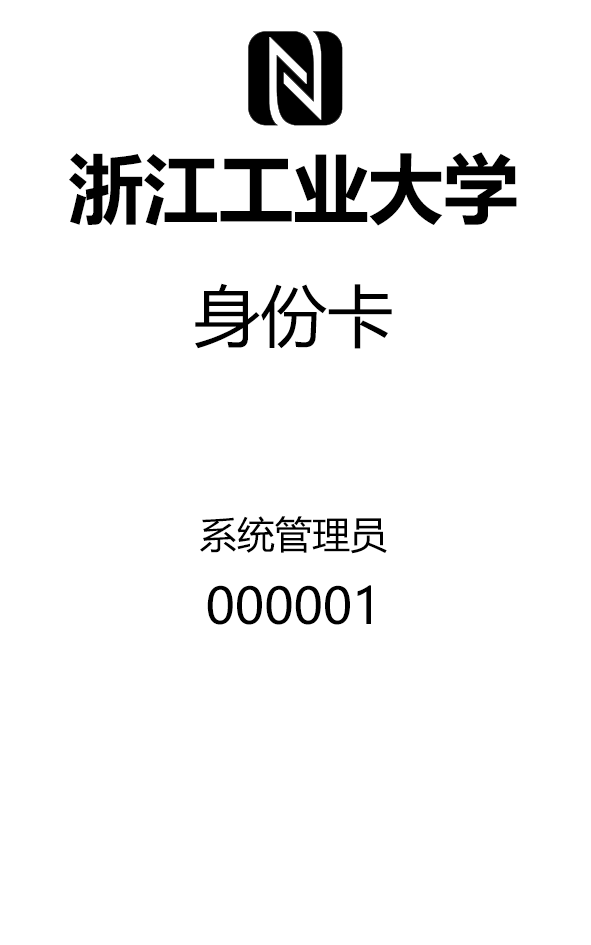
<style>
.page{position:relative;width:591px;height:945px;background:#ffffff}
.page>*{position:absolute;margin:0}
.t1{font:75px "MicrosoftYaHei-Bold";color:#000000}
.t2{font:66.7px "MicrosoftYaHei";color:#000000}
.t3{font:37.5px "MicrosoftYaHei";color:#000000}
.t4{font:50px "MicrosoftYaHei";color:#000000}
</style>
<div class="page">
<p class="t1" style="left:69px;top:152px;width:448px;height:473px;text-align:center">浙江工业大学<br><span class="t2">身份卡<br><br></span><span class="t3">系统管理员<br></span><span class="t4">000001</span></p>
</div>
